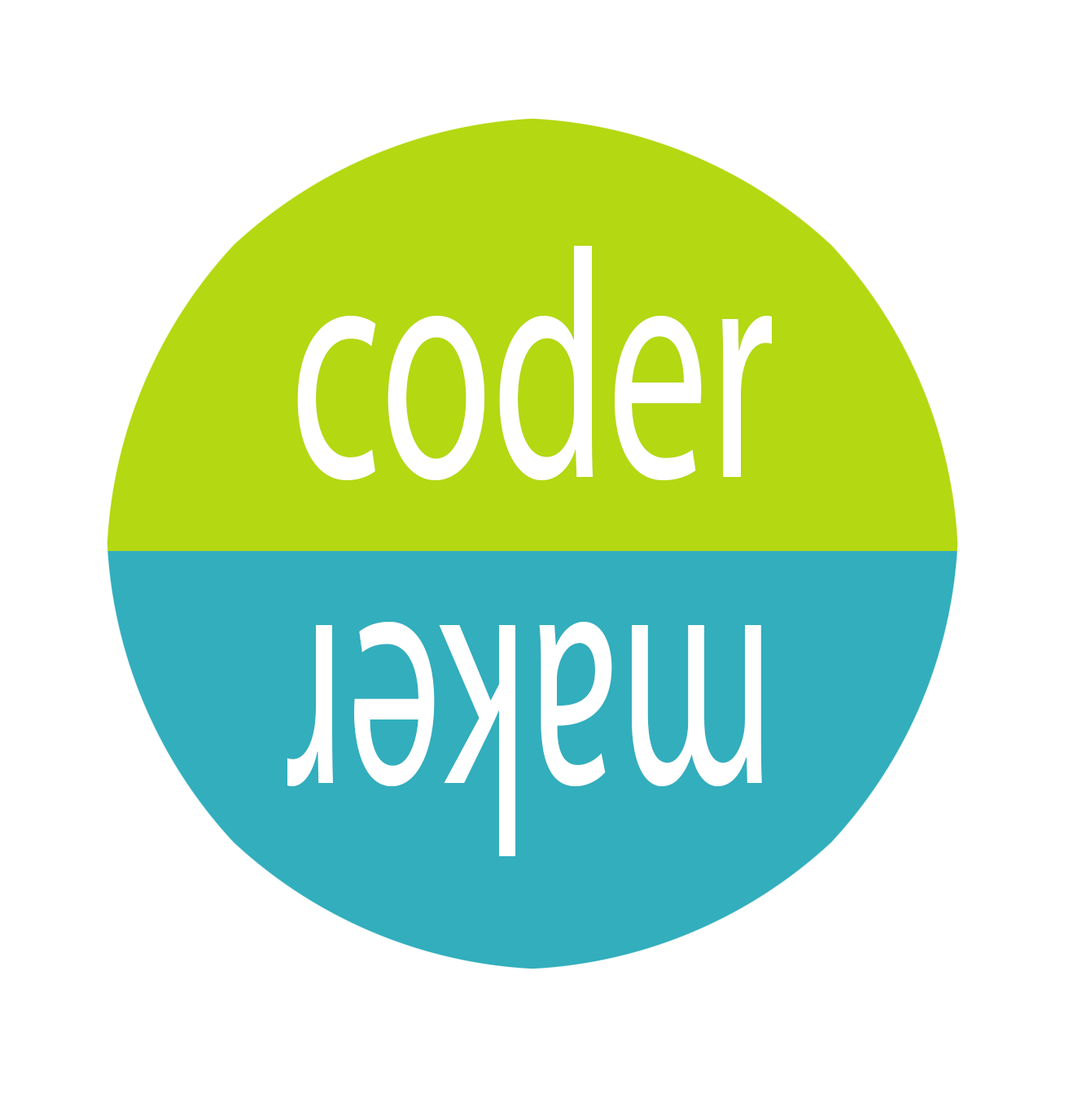
<style>
.page{position:relative;width:1082px;height:1102px;background:#ffffff}
.page>*{position:absolute;margin:0}
.t1{font:325.6px "MyriadPro-Regular";color:#ffffff;scale:0.62 1}
.t2{font:325.6px "MyriadPro-Regular";color:#ffffff;scale:0.57 1}
</style>
<div class="page">
<p class="t1" style="left:297px;top:246px;width:475px;height:235px">coder</p>
<p class="t2" style="left:287px;top:622px;width:475px;height:234px;rotate:180deg">maker</p>
</div>
